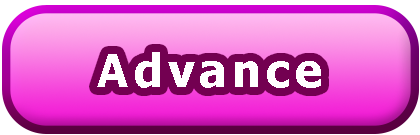
<style>
.page{position:relative;width:420px;height:135px}
.page>*{position:absolute;margin:0}
.t1{font:46.3px "Tahoma-Bold";letter-spacing:0.1em;color:#ffffff}
</style>
<div class="page">
<p class="t1" style="left:97px;top:52px;width:224px;height:36px">Advance</p>
</div>
